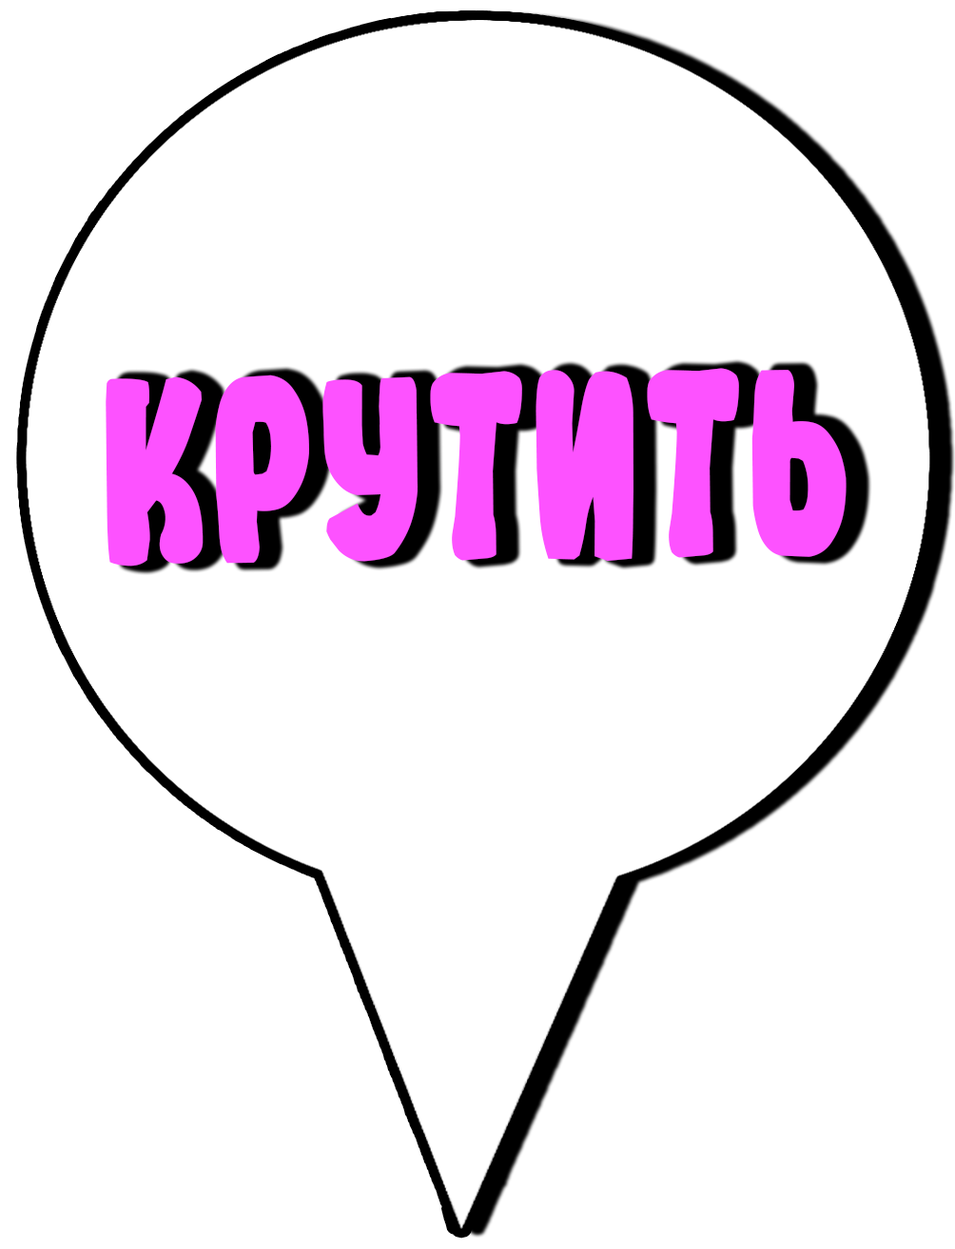
<style>
.page{position:relative;width:955px;height:1249px;background:#ffffff}
.page>*{position:absolute;margin:0}
.t1{font:250.1px "GogonoCocoaMochiCyrillic";color:#fd52ff;scale:0.78 1}
</style>
<div class="page">
<p class="t1" style="left:106px;top:368px;width:740px;height:199px;rotate:-1deg">Крутить</p>
</div>
